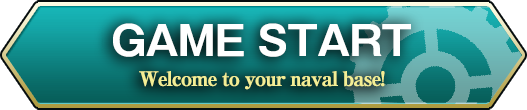
<style>
.page{position:relative;width:527px;height:110px}
.page>*{position:absolute;margin:0}
.t1{font:20px/30px "RyuminPro-ExBold";letter-spacing:-0.08em;color:#f3ee95;font-weight:bold}
.t2{font:40px/30px "GothicMB101Pro-DeBold";letter-spacing:-0.04em;color:#ffffff;font-weight:bold}
</style>
<div class="page">
<p class="t1" style="left:113px;top:23px;width:298px;height:67px;text-align:center"><span class="t2">GAME START<br></span>Welcome to your naval base!</p>
</div>
